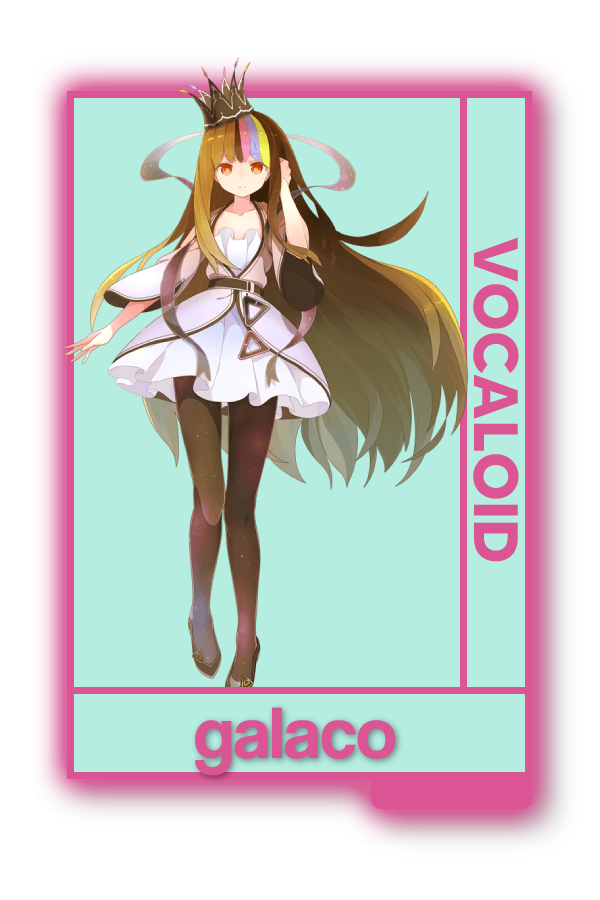
<style>
.page{position:relative;width:600px;height:900px;background:#b5ede1}
.page>*{position:absolute;margin:0}
.t1{font:62.5px "MADETOMMY-Bold";color:#db5493}
.t2{font:75px "CoolveticaRg-Regular";color:#db5493}
</style>
<div class="page">
<p class="t1" style="left:473px;top:237px;width:46px;height:325px;rotate:90deg">VOCALOID</p>
<p class="t2" style="left:195px;top:707px;width:201px;height:69px">galaco</p>
</div>
